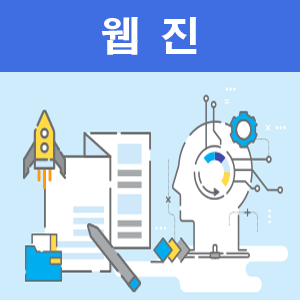
<style>
.page{position:relative;width:300px;height:300px;background:#ceecfb}
.page>*{position:absolute;margin:0}
.t1{font:40px "AdobeGothicStd-Bold";letter-spacing:0.15em;color:#ffffff}
</style>
<div class="page">
<p class="t1" style="left:101px;top:17px;width:96px;height:38px">웹 진</p>
</div>
